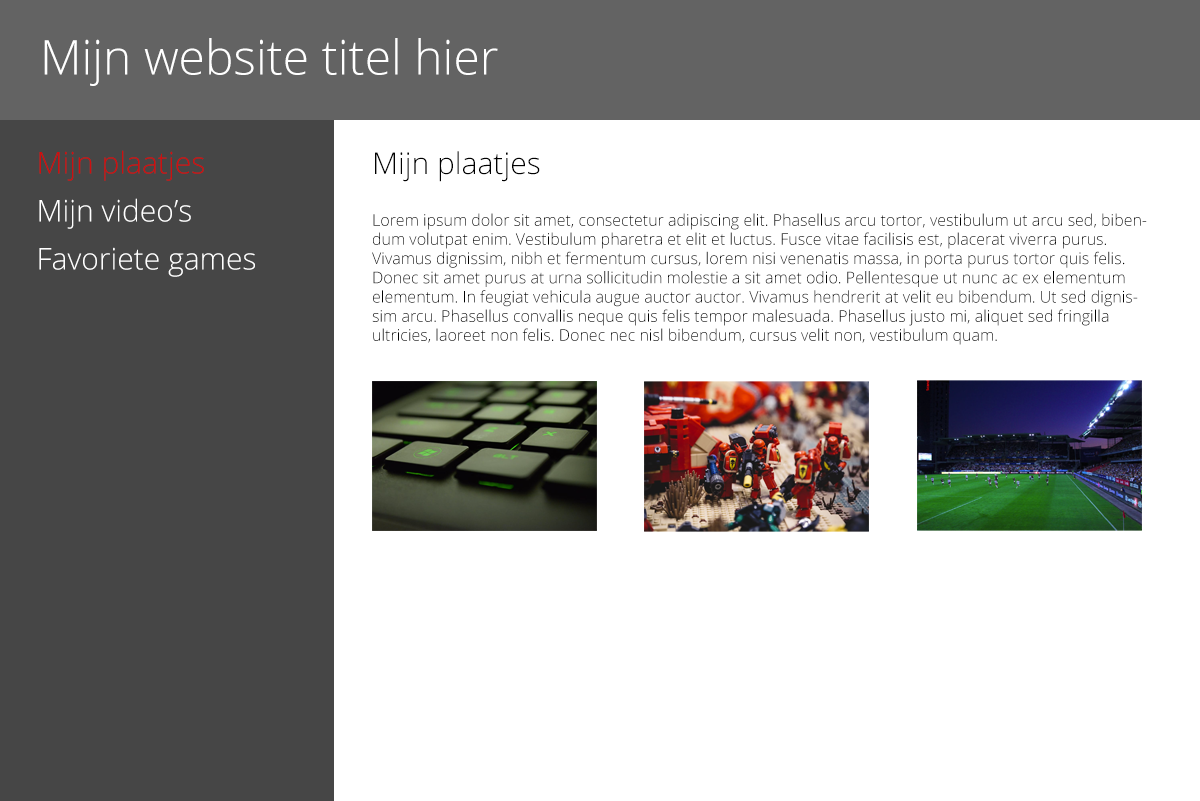
<style>
.page{position:relative;width:1200px;height:801px;background:#ffffff}
.page>*{position:absolute;margin:0}
.t1{font:48px "OpenSans-Light";color:#ffffff}
.t2{font:30px/48px "OpenSans-Light";color:#ffffff}
.t3{font:30px/48px "OpenSans-Light";color:#ce0e0e}
.t4{font:30px "OpenSans-Light";color:#000000}
.t5{font:16px "OpenSans-Light";color:#000000}
</style>
<div class="page">
<p class="t1" style="left:44px;top:38px;width:454px;height:48px">Mijn website titel hier</p>
<p class="t2" style="left:39px;top:150px;width:216px;height:127px"><span class="t3">Mijn plaatjes<br></span>Mijn video’s<br>Favoriete games</p>
<p class="t4" style="left:375px;top:151px;width:165px;height:31px">Mijn plaatjes</p>
<p class="t5" style="left:372px;top:213px;width:775px;height:132px">Lorem ipsum dolor sit amet, consectetur adipiscing elit. Phasellus arcu tortor, vestibulum ut arcu sed, bibendum volutpat enim. Vestibulum pharetra et elit et luctus. Fusce vitae facilisis est, placerat viverra purus. Vivamus dignissim, nibh et fermentum cursus, lorem nisi venenatis massa, in porta purus tortor quis felis. Donec sit amet purus at urna sollicitudin molestie a sit amet odio. Pellentesque ut nunc ac ex elementum elementum. In feugiat vehicula augue auctor auctor. Vivamus hendrerit at velit eu bibendum. Ut sed dignissim arcu. Phasellus convallis neque quis felis tempor malesuada. Phasellus justo mi, aliquet sed fringilla ultricies, laoreet non felis. Donec nec nisl bibendum, cursus velit non, vestibulum quam.</p>
</div>
